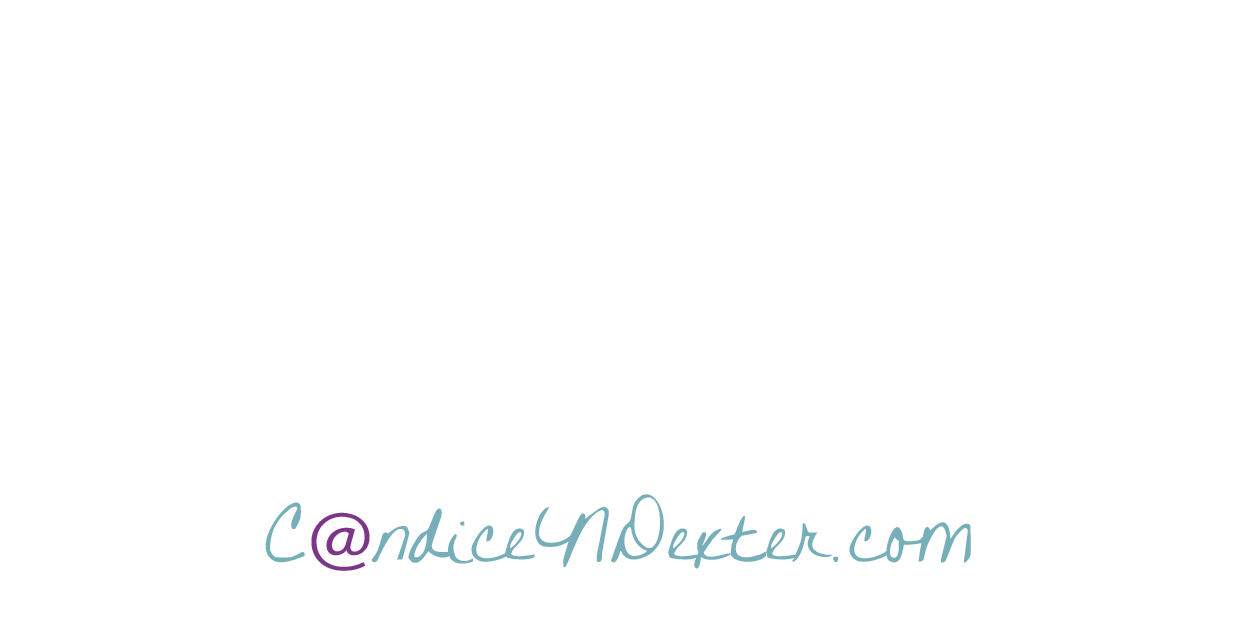
<style>
.page{position:relative;width:1252px;height:626px;background:#ffffff}
.page>*{position:absolute;margin:0}
.t1{font:87.5px "WrittenonHisHands";color:#76afba;scale:1.08 1}
.t2{font:72.9px "Lato-Regular";color:#7b3688;scale:1.08 1}
.t3{font:87.5px "WrittenonHisHands";letter-spacing:-0.05em;color:#76afba;scale:1.08 1}
.t4{font:105px "WrittenonHisHands";letter-spacing:0.025em;color:#76afba;scale:0.93 1}
.t5{font:87.5px "WrittenonHisHands";letter-spacing:-0.01em;color:#76afba;scale:1.08 1}
</style>
<div class="page">
<p class="t1" style="left:265px;top:494px;width:706px;height:77px">C<span class="t2">@</span><span class="t3">n</span><span class="t4">d</span><span class="t5">ic</span>eNDexter.com</p>
</div>
